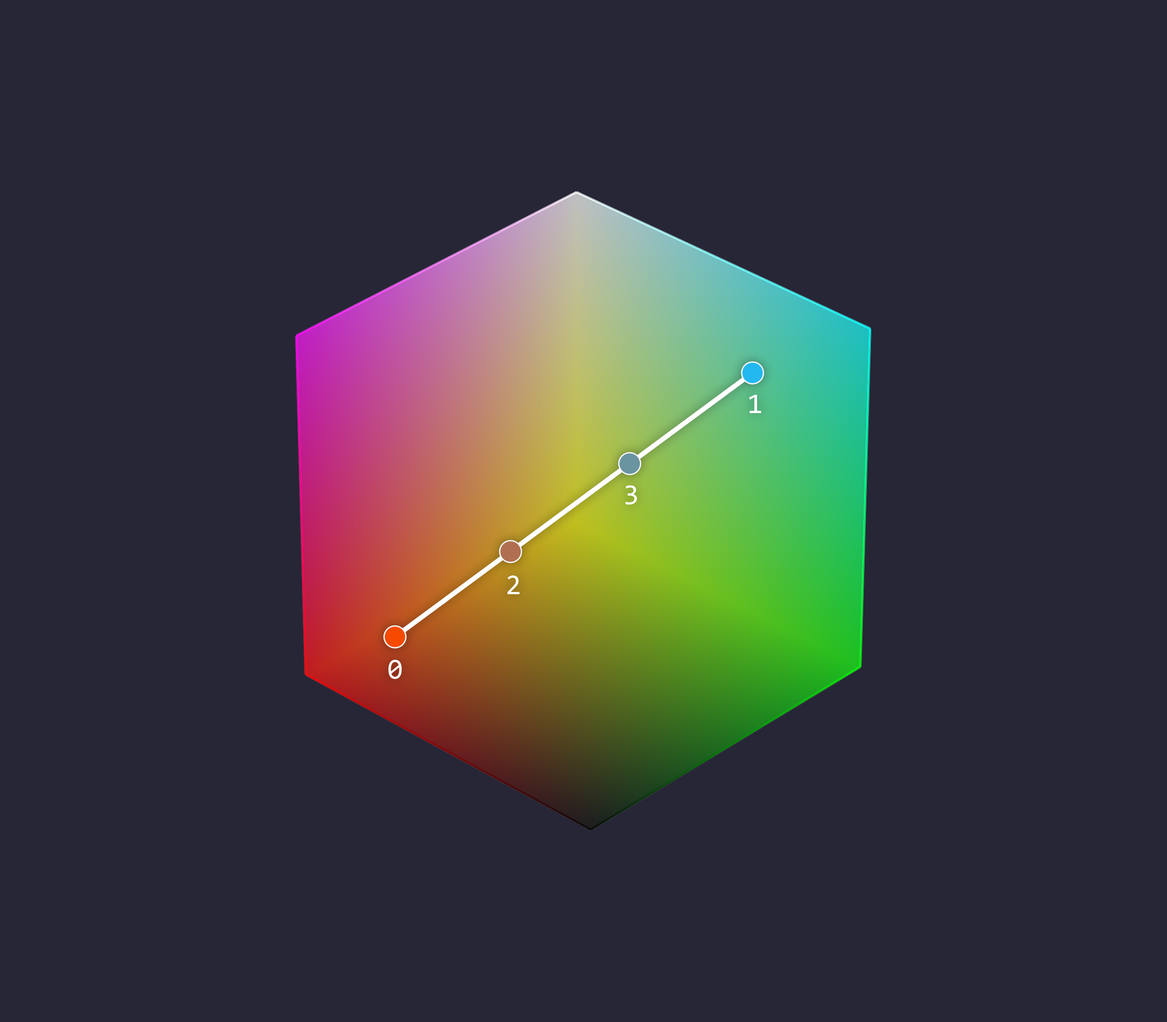
<style>
.page{position:relative;width:1167px;height:1022px;background:#272636}
.page>*{position:absolute;margin:0}
.t1{font:28.5px "Consolas";color:#ffffff}
</style>
<div class="page">
<p class="t1" style="left:749px;top:395px;width:12px;height:18px">1</p>
<p class="t1" style="left:625px;top:485px;width:12px;height:19px">3</p>
<p class="t1" style="left:507px;top:575px;width:13px;height:19px">2</p>
<p class="t1" style="left:388px;top:660px;width:14px;height:19px">0</p>
</div>
